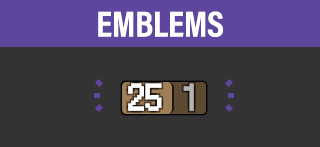
<style>
.page{position:relative;width:320px;height:147px;background:#333333}
.page>*{position:absolute;margin:0}
.t1{font:36.3px "AcuminProCond-Bold";color:#ffffff;text-transform:uppercase}
</style>
<div class="page">
<p class="t1" style="left:98px;top:11px;width:125px;height:26px">EMBLEMS</p>
</div>
